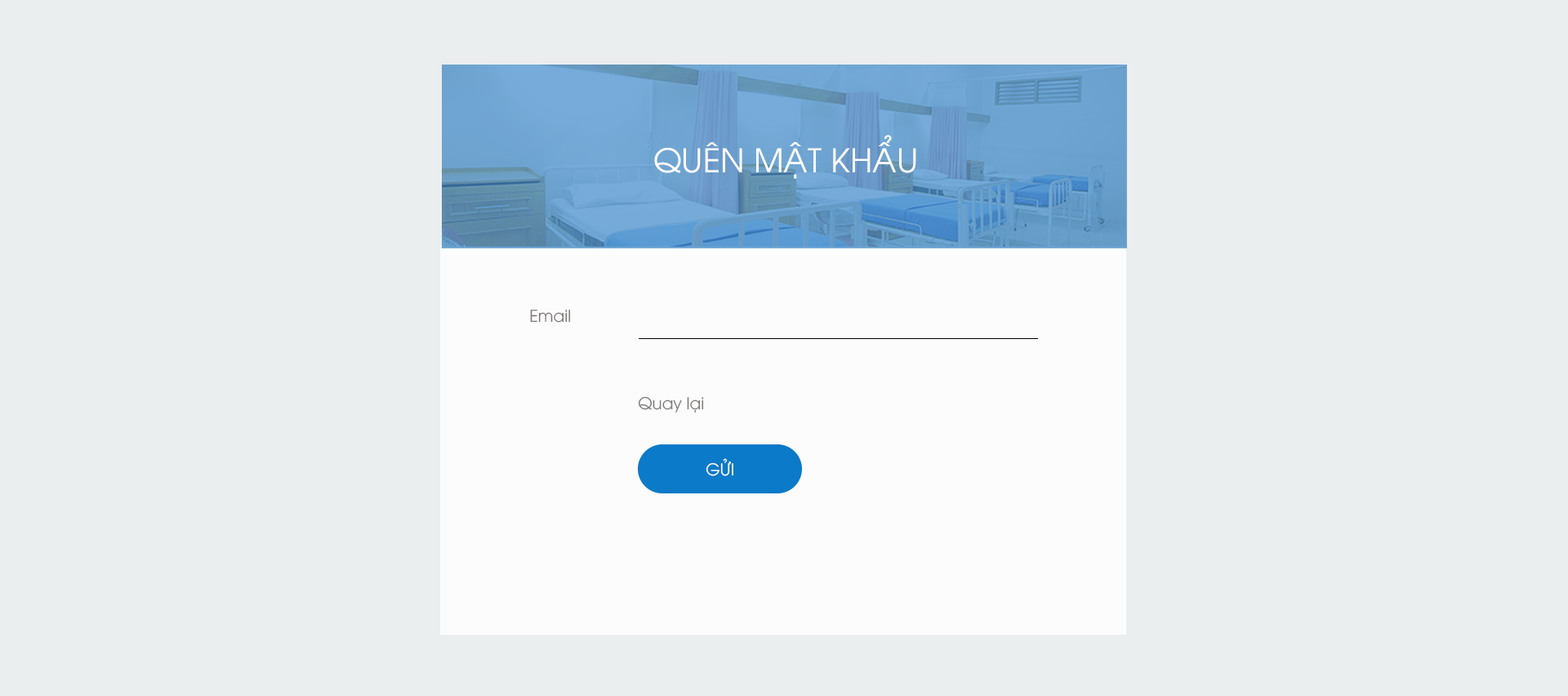
<style>
.page{position:relative;width:1568px;height:696px;background:#ebeeef}
.page>*{position:absolute;margin:0}
.t1{font:32.7px "UTM-Avo";color:#fefefe}
.t2{font:16.3px "UTM-Avo";color:#7f7979}
.t3{font:16.3px "UTM-Avo";color:#ffffff}
</style>
<div class="page">
<p class="t1" style="left:654px;top:135px;width:262px;height:44px">QUÊN MẬT KHẨU</p>
<p class="t2" style="left:530px;top:310px;width:41px;height:13px">Email</p>
<p class="t2" style="left:638px;top:396px;width:66px;height:16px">Quay lại</p>
<p class="t3" style="left:706px;top:458px;width:27px;height:18px">GỬI</p>
</div>
